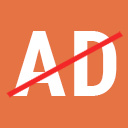
<style>
.page{position:relative;width:128px;height:128px;background:#e67343}
.page>*{position:absolute;margin:0}
.t1{font:91px "RobotoCondensed-Bold";color:#ffffff;text-transform:uppercase}
</style>
<div class="page">
<p class="t1" style="left:13px;top:31px;width:104px;height:65px">AD</p>
</div>
